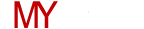
<style>
.page{position:relative;width:144px;height:29px;background:#ffffff}
.page>*{position:absolute;margin:0}
.t1{font:37.3px "ArialMT";letter-spacing:-0.14em;color:#c10101;scale:0.91 1}
</style>
<div class="page">
<p class="t1" style="left:14px;top:1px;width:44px;height:27px">MY</p>
</div>
